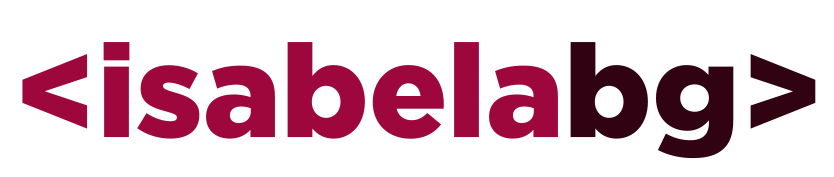
<style>
.page{position:relative;width:834px;height:177px;background:#ffffff}
.page>*{position:absolute;margin:0}
.t1{font:130px "Gotham-Black";color:#9d073c}
.t2{font:130px "Gotham-Black";color:#300212}
</style>
<div class="page">
<p class="t1" style="left:22px;top:42px;width:794px;height:117px">&lt;isabela<span class="t2">bg&gt;</span></p>
</div>
